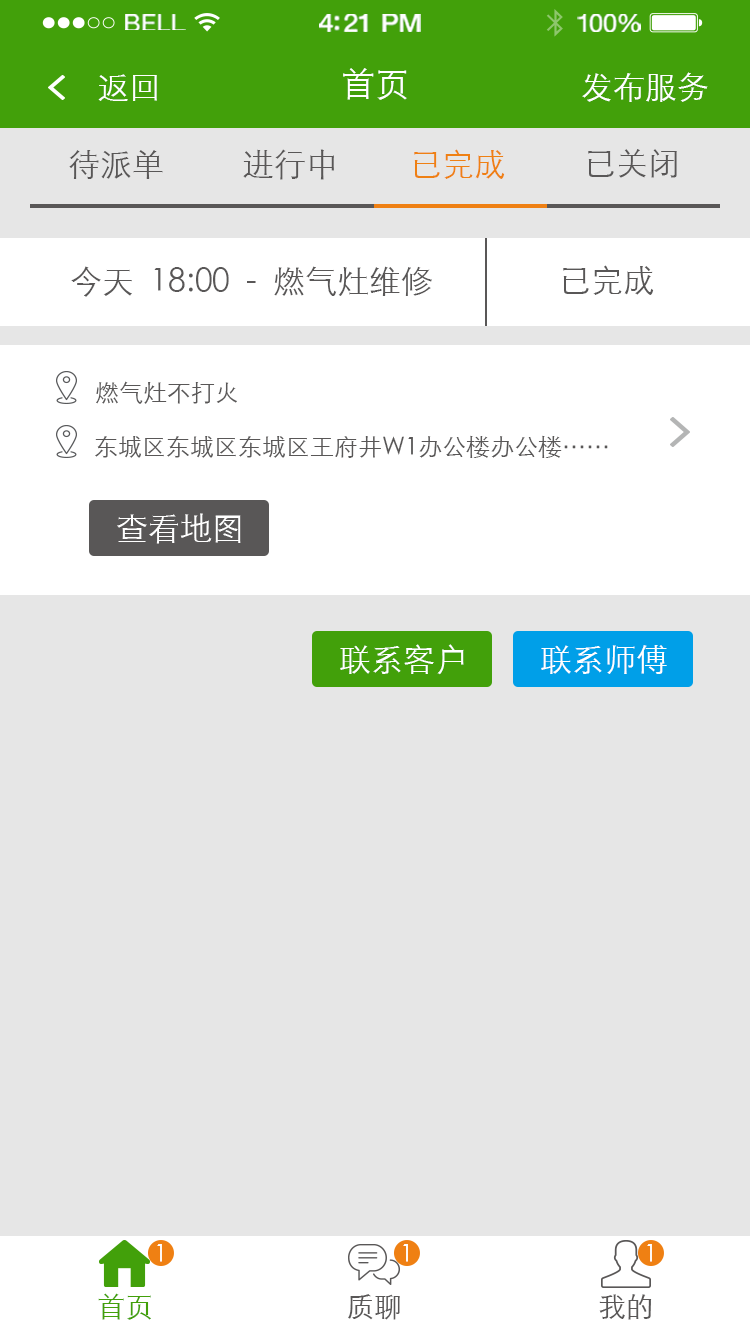
<style>
.page{position:relative;width:750px;height:1334px;background:#e6e6e6}
.page>*{position:absolute;margin:0}
.t1{font:23.3px "HelveticaNeue";letter-spacing:0.02em;color:#ffffff;scale:1.06 1}
.t2{font:25.3px "HelveticaNeue-Medium";letter-spacing:-0.02em;color:#ffffff;scale:1.06 1}
.t3{font:24.3px "HelveticaNeue";letter-spacing:-0.02em;color:#ffffff;scale:1.06 1}
.t4{font:32px "STXihei";color:#ffffff}
.t5{font:34px "STXihei";color:#ffffff}
.t6{font:32px "STXihei";color:#595757}
.t7{font:32px "STXihei";color:#ef8013}
.t8{font:24px "STXihei";color:#595757}
.t9{font:24px "STXihei";color:#ffffff}
.t10{font:28px "STXihei";color:#42a00a}
.t11{font:28px "STXihei";color:#595757}
</style>
<div class="page">
<p class="t1" style="left:125px;top:14px;width:61px;height:16px">BELL</p>
<p class="t2" style="left:319px;top:14px;width:102px;height:18px">4:21 PM</p>
<p class="t3" style="left:577px;top:14px;width:64px;height:18px">100%</p>
<p class="t4" style="left:98px;top:74px;width:59px;height:27px">返回</p>
<p class="t5" style="left:343px;top:68px;width:64px;height:32px">首页</p>
<p class="t4" style="left:582px;top:72px;width:126px;height:30px">发布服务</p>
<p class="t6" style="left:69px;top:150px;width:94px;height:29px">待派单</p>
<p class="t6" style="left:243px;top:149px;width:91px;height:31px">进行中</p>
<p class="t7" style="left:414px;top:149px;width:91px;height:30px">已完成</p>
<p class="t6" style="left:588px;top:149px;width:89px;height:29px">已关闭</p>
<p class="t6" style="left:71px;top:266px;width:361px;height:31px">今天  18:00  -  燃气灶维修</p>
<p class="t6" style="left:563px;top:265px;width:91px;height:30px">已完成</p>
<p class="t8" style="left:96px;top:381px;width:141px;height:23px">燃气灶不打火</p>
<p class="t8" style="left:95px;top:435px;width:513px;height:23px">东城区东城区东城区王府井W1办公楼办公楼……</p>
<p class="t4" style="left:117px;top:513px;width:124px;height:31px">查看地图</p>
<p class="t4" style="left:340px;top:644px;width:124px;height:31px">联系客户</p>
<p class="t4" style="left:541px;top:645px;width:126px;height:29px">联系师傅</p>
<p class="t9" style="left:157px;top:1244px;width:5px;height:18px">1</p>
<p class="t9" style="left:403px;top:1244px;width:5px;height:18px">1</p>
<p class="t9" style="left:647px;top:1244px;width:5px;height:18px">1</p>
<p class="t10" style="left:98px;top:1293px;width:53px;height:27px">首页</p>
<p class="t11" style="left:348px;top:1294px;width:52px;height:26px">质聊</p>
<p class="t11" style="left:599px;top:1294px;width:53px;height:26px">我的</p>
</div>
